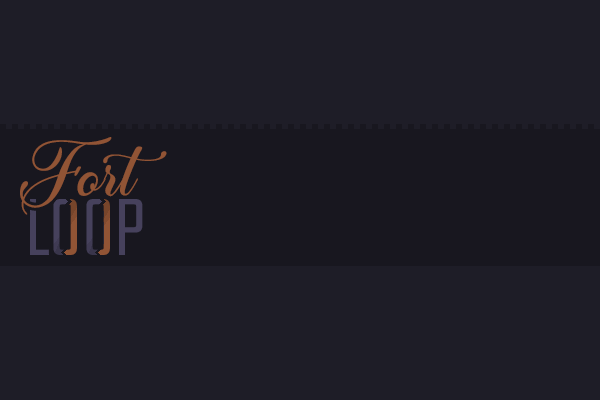
<style>
.page{position:relative;width:600px;height:400px;background:#1e1d27}
.page>*{position:absolute;margin:0}
.t1{font:100px "Madina";color:#915435}
.t2{font:90px "Teko-Light";color:#46415c}
</style>
<div class="page">
<p class="t1" style="left:20px;top:137px;width:147px;height:78px">Fort</p>
<p class="t2" style="left:30px;top:199px;width:113px;height:56px">LOOP</p>
</div>
